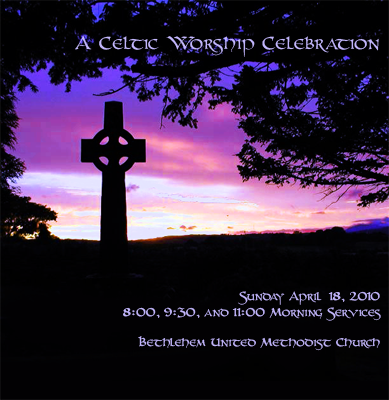
<style>
.page{position:relative;width:389px;height:400px}
.page>*{position:absolute;margin:0}
.t1{font:20.3px "UnZialish";color:#c2b6fc}
.t2{font:12.7px "UnZialish";color:#c2b6fc}
</style>
<div class="page">
<p class="t1" style="left:75px;top:35px;width:304px;height:22px">A Celtic Worship Celebration</p>
<p class="t2" style="left:123px;top:291px;width:258px;height:60px;text-align:right">Sunday April  18, 2010<br>8:00, 9:30, and 11:00 Morning Services<br><br>Bethlehem United Methodist Church</p>
</div>
